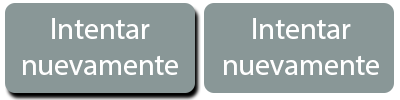
<style>
.page{position:relative;width:400px;height:100px;background:#899797}
.page>*{position:absolute;margin:0}
.t1{font:30px "MyriadHebrew-Regular";color:#ffffff}
</style>
<div class="page">
<p class="t1" style="left:22px;top:18px;width:156px;height:57px;text-align:center">Intentar<br>nuevamente</p>
<p class="t1" style="left:223px;top:18px;width:156px;height:57px;text-align:center">Intentar<br>nuevamente</p>
</div>
